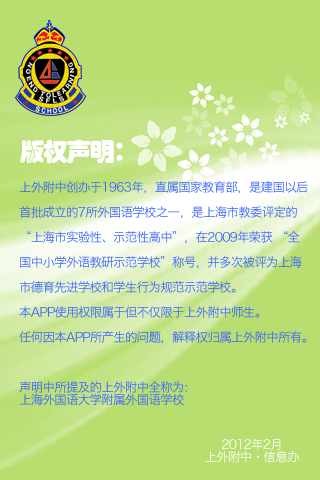
<style>
.page{position:relative;width:320px;height:480px;background:#b8de6f}
.page>*{position:absolute;margin:0}
.t1{font:12.5px/25px "HiraginoSansGB-W3";letter-spacing:-0.059em;color:#3c65ff}
.t2{font:25px/41.7px "STHupo";letter-spacing:-0.059em;color:#ffffff}
.t3{font:12.5px/12.5px "HiraginoSansGB-W3";letter-spacing:-0.059em;color:#3c65ff}
.t4{font:12.5px/12.5px "HiraginoSansGB-W3";letter-spacing:-0.059em;color:#ffffff}
</style>
<div class="page">
<p class="t1" style="left:19px;top:139px;width:289px;height:267px"><span class="t2">版权声明：<br></span>上外附中创办于1963年，直属国家教育部，是建国以后<br>首批成立的7所外国语学校之一，是上海市教委评定的<br>“上海市实验性、示范性高中”，在2009年荣获 “全<br>国中小学外语教研示范学校”称号，并多次被评为上海<br>市德育先进学校和学生行为规范示范学校。<br>本APP使用权限属于但不仅限于上外附中师生。<br>任何因本APP所产生的问题，解释权归属上外附中所有。<br><br><span class="t3">声明中所提及的上外附中全称为：<br>上海外国语大学附属外国语学校</span></p>
<p class="t4" style="left:205px;top:438px;width:94px;height:25px;text-align:center">2012年2月<br>上外附中·信息办</p>
</div>
